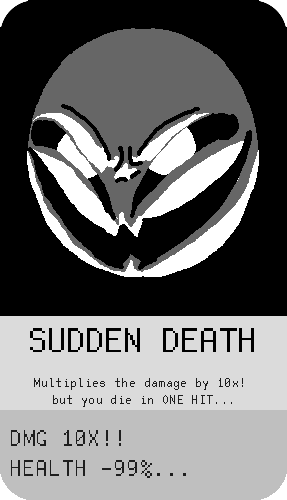
<style>
.page{position:relative;width:287px;height:500px;background:#000000}
.page>*{position:absolute;margin:0}
.t1{font:37.5px "FreePixel-Regular";color:#000000}
.t2{font:14.1px "FreePixel-Regular";color:#1e1e1e}
.t3{font:25px "FreePixel-Regular";color:#1e1e1e}
</style>
<div class="page">
<p class="t1" style="left:30px;top:328px;width:224px;height:24px">SUDDEN DEATH</p>
<p class="t2" style="left:34px;top:378px;width:209px;height:29px;text-align:center">Multiplies the damage by 10x! <br>but you die in ONE HIT...</p>
<p class="t3" style="left:11px;top:430px;width:175px;height:48px">DMG 10X!!<br>HEALTH -99%...</p>
</div>
